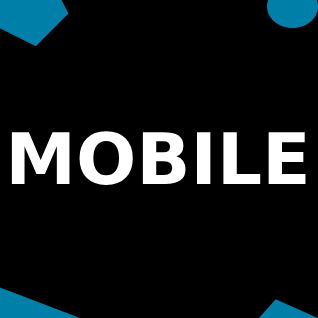
<style>
.page{position:relative;width:318px;height:318px;background:#000000}
.page>*{position:absolute;margin:0}
.t1{font:71px "DejaVuSans-Bold";color:#ffffff}
</style>
<div class="page">
<p class="t1" style="left:11px;top:131px;width:295px;height:55px">MOBILE</p>
</div>
